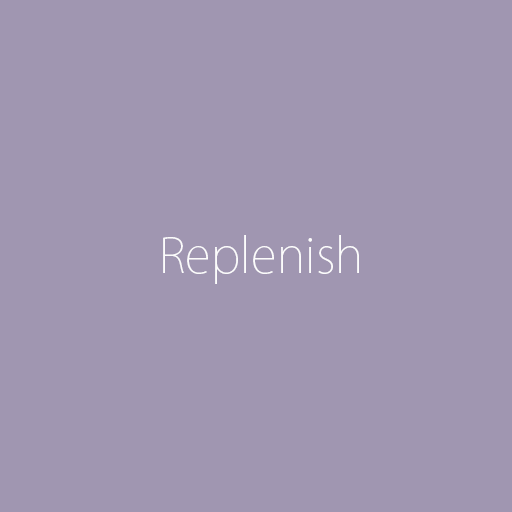
<style>
.page{position:relative;width:512px;height:512px;background:#a096b1}
.page>*{position:absolute;margin:0}
.t1{font:48px "KozGoPro-ExtraLight";color:#fcfcfc}
</style>
<div class="page">
<p class="t1" style="left:163px;top:235px;width:196px;height:49px">Replenish</p>
</div>
